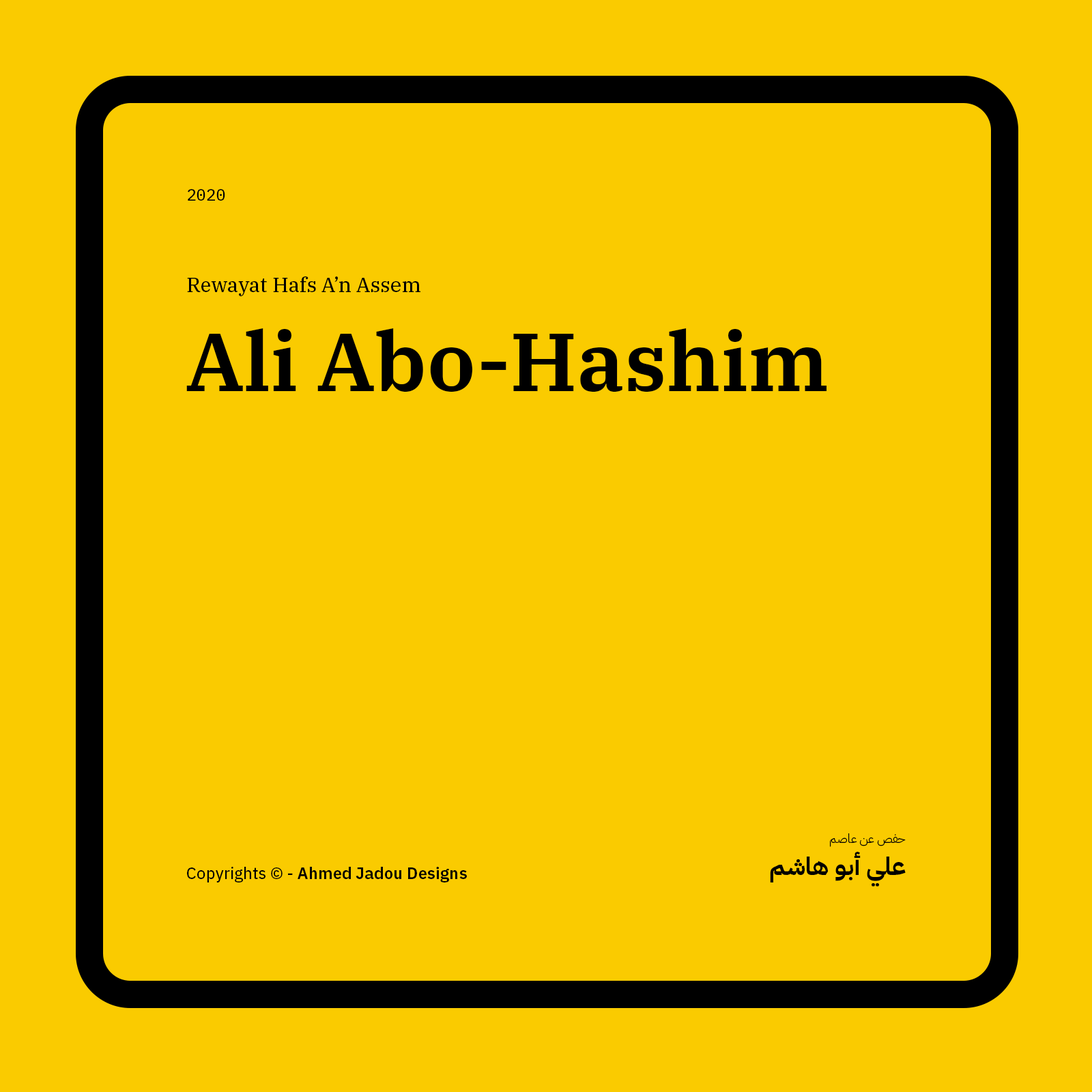
<style>
.page{position:relative;width:1092px;height:1092px;background:#facb00}
.page>*{position:absolute;margin:0}
.t1{font:16.4px "IBMPlexMono-Text";color:#000000}
.t2{font:20.5px "IBMPlexSerif-Text";color:#000000}
.t3{font:81.9px "IBMPlexSerif-SemiBold";color:#000000}
.t4{font:12.3px "IBMPlexArabic-Light";color:#000000}
.t5{font:24.6px "IBMPlexArabic-Bold";color:#000000}
.t6{font:16.4px "IBMPlexSans-SemiBold";color:#000000}
.t7{font:16.4px "IBMPlexSans-Text";color:#000000}
</style>
<div class="page">
<p class="t1" style="left:188px;top:189px;width:37px;height:12px">2020</p>
<p class="t2" style="left:187px;top:276px;width:233px;height:20px">Rewayat Hafs A’n Assem</p>
<p class="t3" style="left:186px;top:328px;width:640px;height:64px">Ali Abo-Hashim</p>
<p class="t4" style="left:830px;top:833px;width:76px;height:14px">حفص عن عاصم</p>
<p class="t5" style="left:770px;top:852px;width:136px;height:35px">علي أبو هاشم</p>
<p class="t6" style="left:187px;top:867px;width:280px;height:15px"><span class="t7">Copyrights © - </span>Ahmed Jadou Designs</p>
</div>
